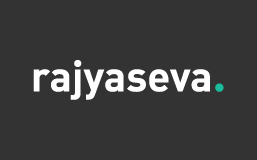
<style>
.page{position:relative;width:257px;height:160px;background:#333333}
.page>*{position:absolute;margin:0}
.t1{font:42px "DIN-BoldAlternate";color:#ffffff}
.t2{font:46px "DIN-BoldAlternate";color:#1abc9c}
</style>
<div class="page">
<p class="t1" style="left:33px;top:60px;width:191px;height:40px">rajyaseva<span class="t2">.</span></p>
</div>
